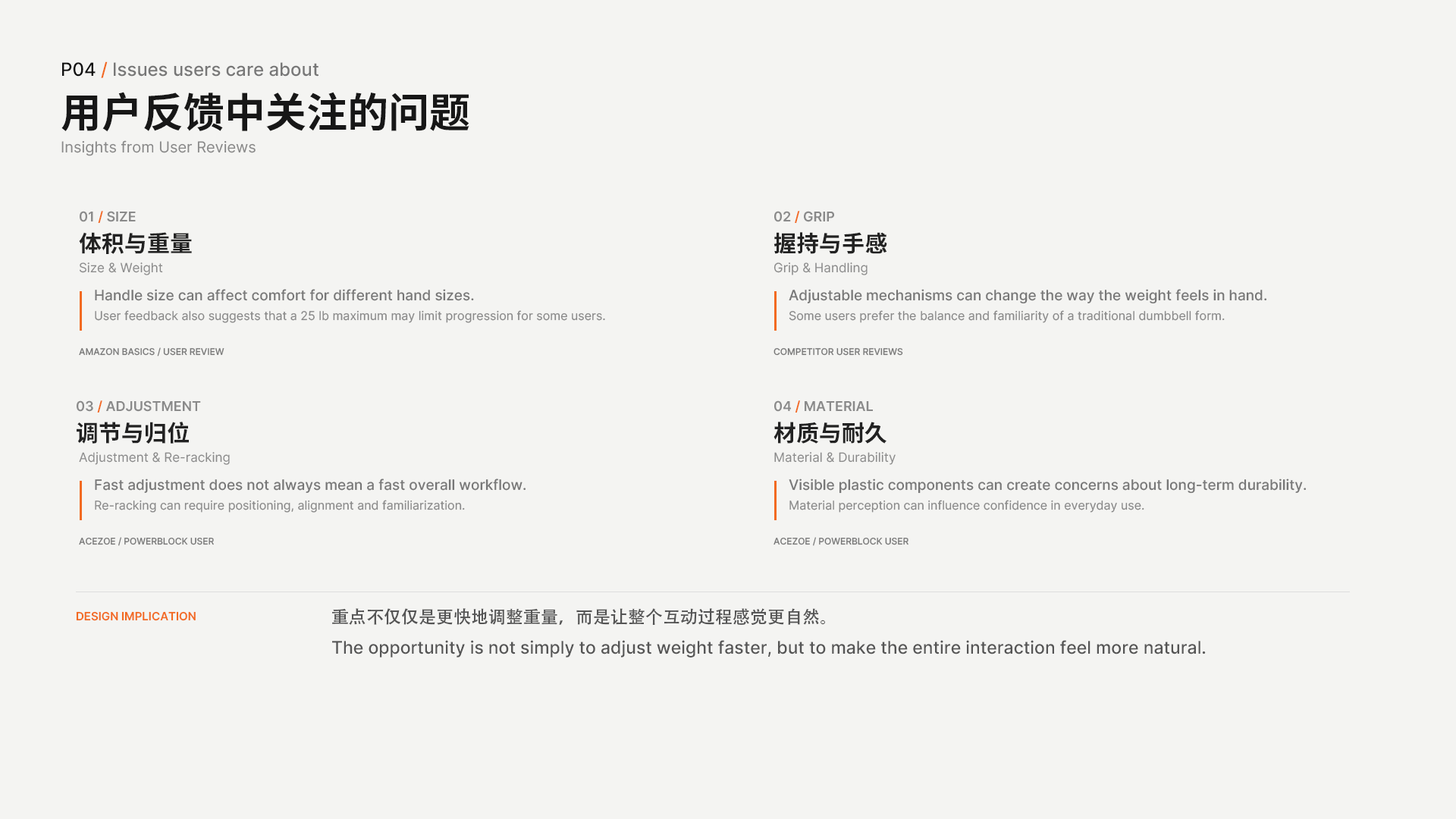
<style>
.page{position:relative;width:1456px;height:819px;background:#f4f4f2}
.page>*{position:absolute;margin:0}
.t1{font:18.2px "Inter-Medium";color:#777777}
.t2{font:18.2px "Inter-Medium";color:#111111}
.t3{font:18.2px "Inter-Medium";color:#f26a21}
.t4{font:40.9px "SourceHanSansSC-Bold";color:#171717}
.t5{font:15.2px "Inter-Regular";color:#888888}
.t6{font:13.6px "Inter-SemiBold";color:#8a8a8a}
.t7{font:13.6px "Inter-SemiBold";color:#f26a21}
.t8{font:22.7px "SourceHanSansSC-Bold";color:#222222}
.t9{font:12.9px "Inter-Regular";color:#8a8a8a}
.t10{font:14.4px "Inter-Medium";color:#777777}
.t11{font:12.1px "Inter-Regular";color:#888888}
.t12{font:9.1px "Inter-Medium";color:#777777}
.t13{font:11.4px "Inter-SemiBold";color:#f26a21}
.t14{font:17.4px "Inter-Medium";color:#555555}
.t15{font:17.4px "AdobeHeitiStd-Regular";color:#555555}
</style>
<div class="page">
<p class="t1" style="left:62px;top:61px;width:256px;height:17px"><span class="t2">P04 </span><span class="t3">/ </span>Issues users care about</p>
<p class="t4" style="left:61px;top:92px;width:408px;height:40px">用户反馈中关注的问题</p>
<p class="t5" style="left:61px;top:140px;width:195px;height:16px">Insights from User Reviews</p>
<p class="t6" style="left:80px;top:211px;width:56px;height:12px">01 <span class="t7">/</span> SIZE</p>
<p class="t6" style="left:774px;top:211px;width:60px;height:12px">02 <span class="t7">/</span> GRIP</p>
<p class="t8" style="left:79px;top:232px;width:113px;height:22px">体积与重量</p>
<p class="t8" style="left:773px;top:232px;width:114px;height:22px">握持与手感</p>
<p class="t9" style="left:80px;top:262px;width:83px;height:13px">Size &amp; Weight</p>
<p class="t9" style="left:773px;top:262px;width:95px;height:13px">Grip &amp; Handling</p>
<p class="t10" style="left:95px;top:289px;width:379px;height:12px">Handle size can affect comfort for different hand sizes.</p>
<p class="t10" style="left:789px;top:289px;width:477px;height:15px">Adjustable mechanisms can change the way the weight feels in hand.</p>
<p class="t11" style="left:95px;top:310px;width:510px;height:13px">User feedback also suggests that a 25 lb maximum may limit progression for some users.</p>
<p class="t11" style="left:789px;top:310px;width:436px;height:13px">Some users prefer the balance and familiarity of a traditional dumbbell form.</p>
<p class="t12" style="left:79px;top:347px;width:145px;height:9px">AMAZON BASICS / USER REVIEW</p>
<p class="t12" style="left:773px;top:348px;width:130px;height:8px">COMPETITOR USER REVIEWS</p>
<p class="t6" style="left:77px;top:400px;width:124px;height:13px">03 <span class="t7">/</span> ADJUSTMENT</p>
<p class="t6" style="left:774px;top:400px;width:99px;height:13px">04 <span class="t7">/</span> MATERIAL</p>
<p class="t8" style="left:77px;top:422px;width:112px;height:22px">调节与归位</p>
<p class="t8" style="left:773px;top:422px;width:113px;height:22px">材质与耐久</p>
<p class="t9" style="left:79px;top:452px;width:151px;height:13px">Adjustment &amp; Re-racking</p>
<p class="t9" style="left:774px;top:452px;width:122px;height:13px">Material &amp; Durability</p>
<p class="t10" style="left:95px;top:479px;width:431px;height:14px">Fast adjustment does not always mean a fast overall workflow.</p>
<p class="t10" style="left:789px;top:479px;width:517px;height:15px">Visible plastic components can create concerns about long-term durability.</p>
<p class="t11" style="left:95px;top:500px;width:370px;height:13px">Re-racking can require positioning, alignment and familiarization.</p>
<p class="t11" style="left:789px;top:500px;width:355px;height:13px">Material perception can influence confidence in everyday use.</p>
<p class="t12" style="left:79px;top:537px;width:135px;height:9px">ACEZOE / POWERBLOCK USER REVIEWS</p>
<p class="t12" style="left:773px;top:537px;width:135px;height:9px">ACEZOE / POWERBLOCK USER REVIEWS</p>
<p class="t13" style="left:76px;top:611px;width:120px;height:10px">DESIGN IMPLICATION</p>
<p class="t14" style="left:332px;top:608px;width:874px;height:49px"><span class="t15">重点不仅仅是更快地调整重量，而是让整个互动过程感觉更自然。</span><br>The opportunity is not simply to adjust weight faster, but to make the entire interaction feel more natural.</p>
</div>
